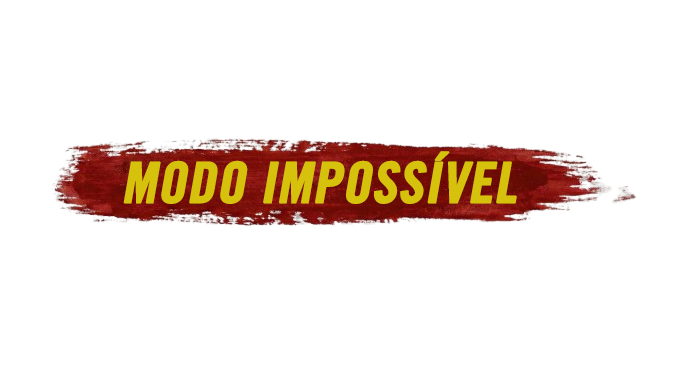
<style>
.page{position:relative;width:677px;height:369px;background:#ffffff}
.page>*{position:absolute;margin:0}
.t1{font:55.7px "TradeGothic-BoldCondTwenty";color:#d6c10c;font-weight:bold;font-style:italic}
</style>
<div class="page">
<p class="t1" style="left:123px;top:151px;width:394px;height:53px">MODO IMPOSSÍVEL</p>
</div>
